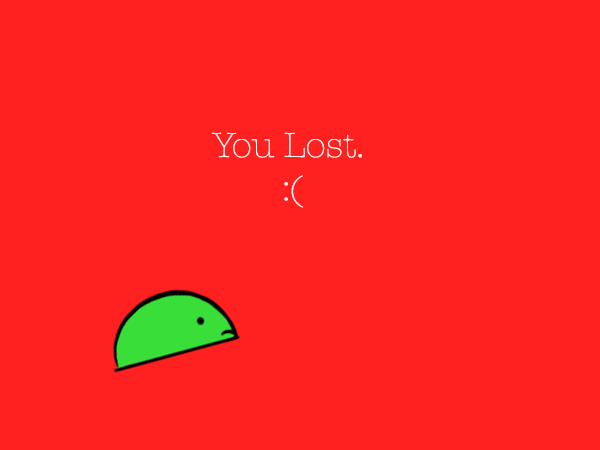
<style>
.page{position:relative;width:600px;height:450px;background:#ff2020}
.page>*{position:absolute;margin:0}
.t1{font:36px "AmericanTypewriter-Light";color:#f7f7f7}
</style>
<div class="page">
<p class="t1" style="left:211px;top:132px;width:151px;height:76px;text-align:center">You Lost. <br>:(</p>
</div>
